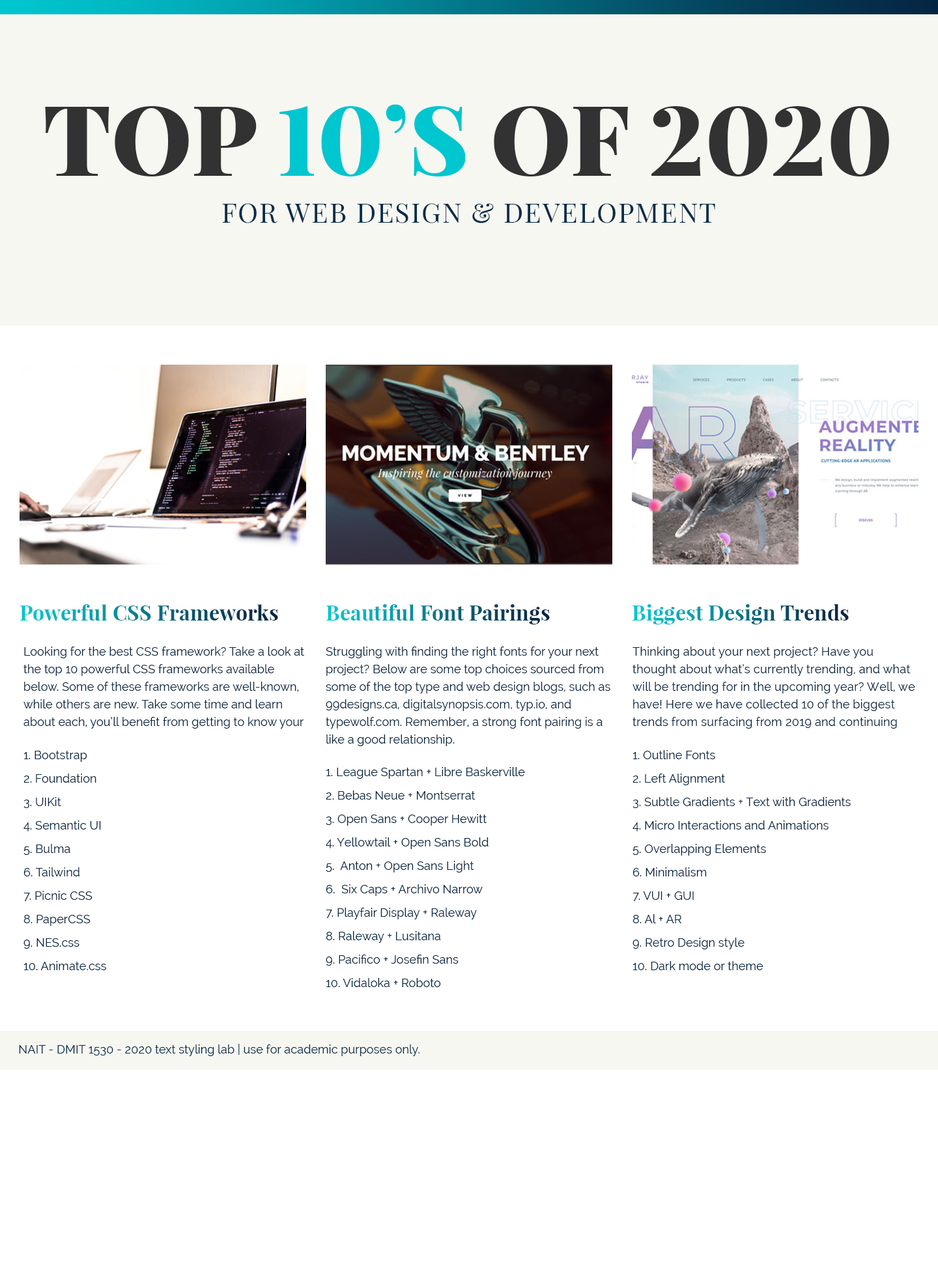
<style>
.page{position:relative;width:938px;height:1271px;background:#ffffff}
.page>*{position:absolute;margin:0}
.t1{font:27.4px/46.9px "PlayfairDisplay-Regular";letter-spacing:0.05em;color:#052d49;text-transform:uppercase}
.t2{font:97.7px/52.1px "PlayfairDisplay-Black";color:#323232;text-transform:uppercase}
.t3{font:97.7px/52.1px "PlayfairDisplay-Black";color:#00c6cf;text-transform:uppercase}
.t4{font:20.8px "PlayfairDisplay-Bold";letter-spacing:0.005em}
.t5{font:11.7px/17.6px "Raleway";letter-spacing:0.005em;color:#052542}
.t6{font:11.7px/23.4px "Raleway";letter-spacing:0.005em;color:#052542}
.t7{font:11.7px "Raleway";letter-spacing:0.005em;color:#052d49}
</style>
<div class="page">
<p class="t1" style="left:45px;top:104px;width:844px;height:119px;text-align:center"><span class="t2">Top </span><span class="t3">10’s</span><span class="t2"> of 2020<br></span>for web design &amp; Development</p>
<p class="t4" style="left:20px;top:604px;width:258px;height:17px">Powerful CSS Frameworks</p>
<p class="t4" style="left:326px;top:604px;width:224px;height:21px">Beautiful Font Pairings</p>
<p class="t4" style="left:632px;top:604px;width:217px;height:21px">Biggest Design Trends</p>
<p class="t5" style="left:23px;top:647px;width:281px;height:82px">Looking for the best CSS framework? Take a look at the top 10 powerful CSS frameworks available below. Some of these frameworks are well-known, while others are new. Take some time and learn about each, you’ll benefit from getting to know your tools.</p>
<p class="t5" style="left:326px;top:647px;width:284px;height:99px">Struggling with finding the right fonts for your next project? Below are some top choices sourced from some of the top type and web design blogs, such as 99designs.ca, digitalsynopsis.com, typ.io, and typewolf.com. Remember, a strong font pairing is a like a good relationship.</p>
<p class="t5" style="left:632px;top:647px;width:283px;height:82px">Thinking about your next project? Have you thought about what’s currently trending, and what will be trending for in the upcoming year? Well, we have! Here we have collected 10 of the biggest trends from surfacing from 2019 and continuing into 2020.</p>
<p class="t6" style="left:23px;top:751px;width:83px;height:219px">1. Bootstrap<br>2. Foundation<br>3. UIKit<br>4. Semantic UI<br>5. Bulma<br>6. Tailwind<br>7. Picnic CSS<br>8. PaperCSS<br>9. NES.css<br>10. Animate.css</p>
<p class="t6" style="left:632px;top:750px;width:219px;height:220px">1. Outline Fonts<br>2. Left Alignment<br>3. Subtle Gradients + Text with Gradients<br>4. Micro Interactions and Animations<br>5. Overlapping Elements<br>6. Minimalism<br>7. VUI + GUI<br>8. Al + AR<br>9. Retro Design style<br>10. Dark mode or theme</p>
<p class="t6" style="left:326px;top:767px;width:199px;height:220px">1. League Spartan + Libre Baskerville<br>2. Bebas Neue + Montserrat<br>3. Open Sans + Cooper Hewitt<br>4. Yellowtail + Open Sans Bold<br>5.  Anton + Open Sans Light<br>6.  Six Caps + Archivo Narrow<br>7. Playfair Display + Raleway<br>8. Raleway + Lusitana<br>9. Pacifico + Josefin Sans<br>10. Vidaloka + Roboto</p>
<p class="t7" style="left:19px;top:1044px;width:400px;height:12px">NAIT - DMIT 1530 - 2020 text styling lab | use for academic purposes only.</p>
</div>
